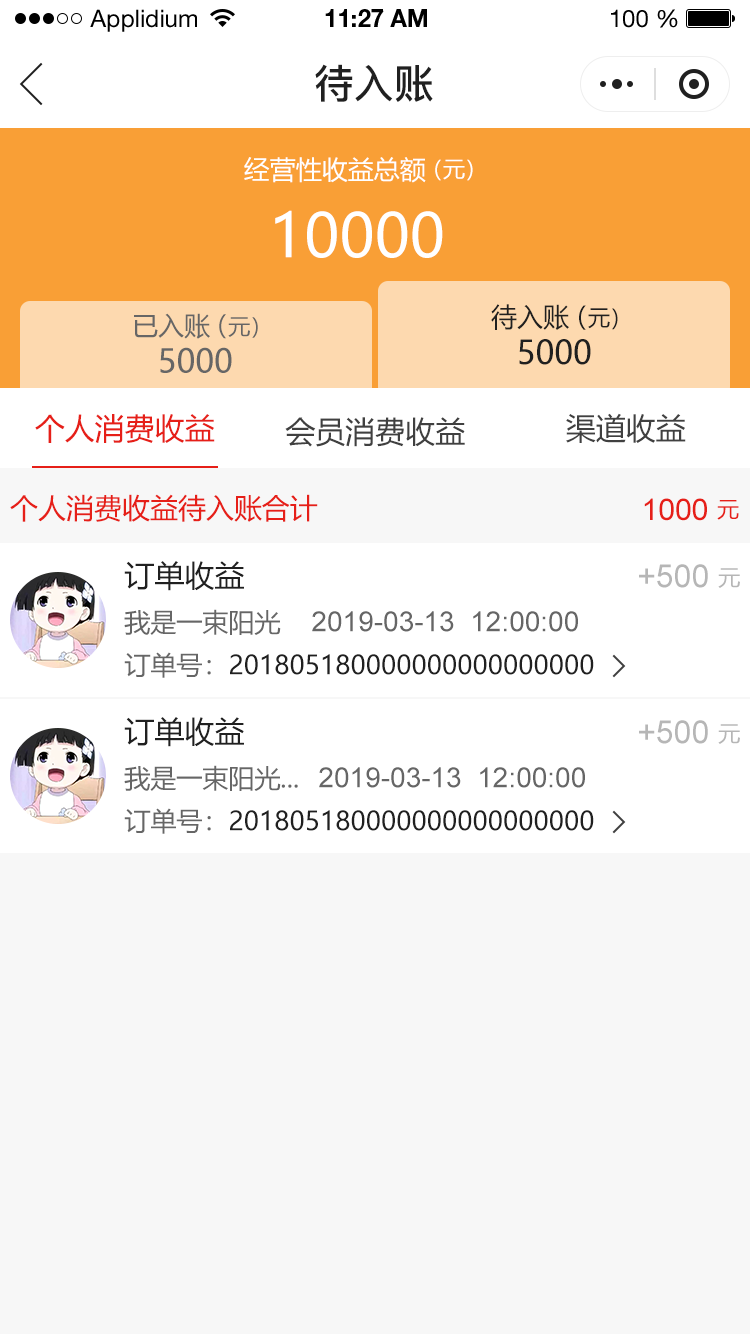
<style>
.page{position:relative;width:750px;height:1334px;background:#f7f7f7}
.page>*{position:absolute;margin:0}
.t1{font:24px "HelveticaNeueLTStd-Roman";color:#000000}
.t2{font:24px "HelveticaNeueLTStd-Bd";color:#000000}
.t3{font:40px "PingFang-SC-Bold";color:#202020;text-transform:uppercase}
.t4{font:26px "MicrosoftYaHei";color:#ffffff;text-transform:uppercase}
.t5{font:22px "MicrosoftYaHei";color:#ffffff;text-transform:uppercase}
.t6{font:60px "MicrosoftYaHei";color:#ffffff;text-transform:uppercase}
.t7{font:26.2px "MicrosoftYaHei";color:#202020;text-transform:uppercase}
.t8{font:22.2px "MicrosoftYaHei";color:#202020;text-transform:uppercase}
.t9{font:26px "MicrosoftYaHei";color:#666666;text-transform:uppercase}
.t10{font:22px "MicrosoftYaHei";color:#666666;text-transform:uppercase}
.t11{font:32.2px "MicrosoftYaHei";color:#202020;text-transform:uppercase}
.t12{font:32px "MicrosoftYaHei";color:#666666;text-transform:uppercase}
.t13{font:30px "MicrosoftYaHei";color:#e61f18;text-transform:uppercase}
.t14{font:30px "MicrosoftYaHei";color:#404040;text-transform:uppercase}
.t15{font:28px "MicrosoftYaHei";color:#e61f18;text-transform:uppercase}
.t16{font:30px "ArialMT";color:#e61f18;text-transform:uppercase}
.t17{font:22px "MicrosoftYaHei";color:#e61f18;text-transform:uppercase}
.t18{font:30px "MicrosoftYaHei";color:#202020;text-transform:uppercase}
.t19{font:32px "ArialMT";color:#b6b6b6;text-transform:uppercase}
.t20{font:22px "MicrosoftYaHei";color:#b6b6b6;text-transform:uppercase}
.t21{font:28px "ArialMT";color:#666666;text-transform:uppercase}
.t22{font:26px "MicrosoftYaHei";color:#202020;text-transform:uppercase}
</style>
<div class="page">
<p class="t1" style="left:90px;top:9px;width:107px;height:23px">Applidium</p>
<p class="t2" style="left:325px;top:9px;width:102px;height:18px">11:27 AM</p>
<p class="t1" style="left:611px;top:9px;width:67px;height:19px">100 %</p>
<p class="t3" style="left:315px;top:64px;width:118px;height:38px">待入账</p>
<p class="t4" style="left:244px;top:157px;width:182px;height:26px">经营性收益总额</p>
<p class="t5" style="left:435px;top:159px;width:38px;height:22px">（元）</p>
<p class="t6" style="left:275px;top:210px;width:168px;height:48px">10000</p>
<p class="t7" style="left:491px;top:304px;width:78px;height:26px">待入账</p>
<p class="t8" style="left:579px;top:305px;width:39px;height:25px"><span class="t7">（</span>元）</p>
<p class="t9" style="left:134px;top:313px;width:76px;height:26px">已入账</p>
<p class="t10" style="left:219px;top:314px;width:39px;height:25px"><span class="t9">（</span>元）</p>
<p class="t11" style="left:519px;top:339px;width:72px;height:26px">5000</p>
<p class="t12" style="left:160px;top:347px;width:72px;height:26px">5000</p>
<p class="t13" style="left:35px;top:414px;width:180px;height:29px">个人消费收益</p>
<p class="t14" style="left:566px;top:413px;width:120px;height:30px">渠道收益</p>
<p class="t14" style="left:285px;top:417px;width:180px;height:30px">会员消费收益</p>
<p class="t15" style="left:10px;top:494px;width:308px;height:28px">个人消费收益待入账合计</p>
<p class="t16" style="left:644px;top:498px;width:63px;height:23px">1000</p>
<p class="t17" style="left:717px;top:500px;width:22px;height:20px">元</p>
<p class="t18" style="left:124px;top:561px;width:120px;height:30px">订单收益</p>
<p class="t19" style="left:639px;top:564px;width:69px;height:24px">+500</p>
<p class="t20" style="left:718px;top:568px;width:22px;height:20px">元</p>
<p class="t9" style="left:124px;top:609px;width:157px;height:26px">我是一束阳光</p>
<p class="t21" style="left:312px;top:611px;width:266px;height:21px">2019-03-13  12:00:00</p>
<p class="t22" style="left:124px;top:652px;width:470px;height:26px"><span class="t9">订单号：</span>201805180000000000000000</p>
<p class="t18" style="left:124px;top:717px;width:120px;height:30px">订单收益</p>
<p class="t19" style="left:639px;top:720px;width:69px;height:24px">+500</p>
<p class="t20" style="left:718px;top:724px;width:22px;height:20px">元</p>
<p class="t9" style="left:124px;top:765px;width:174px;height:26px">我是一束阳光...</p>
<p class="t21" style="left:319px;top:767px;width:266px;height:21px">2019-03-13  12:00:00</p>
<p class="t22" style="left:124px;top:808px;width:470px;height:26px"><span class="t9">订单号：</span>201805180000000000000000</p>
</div>
